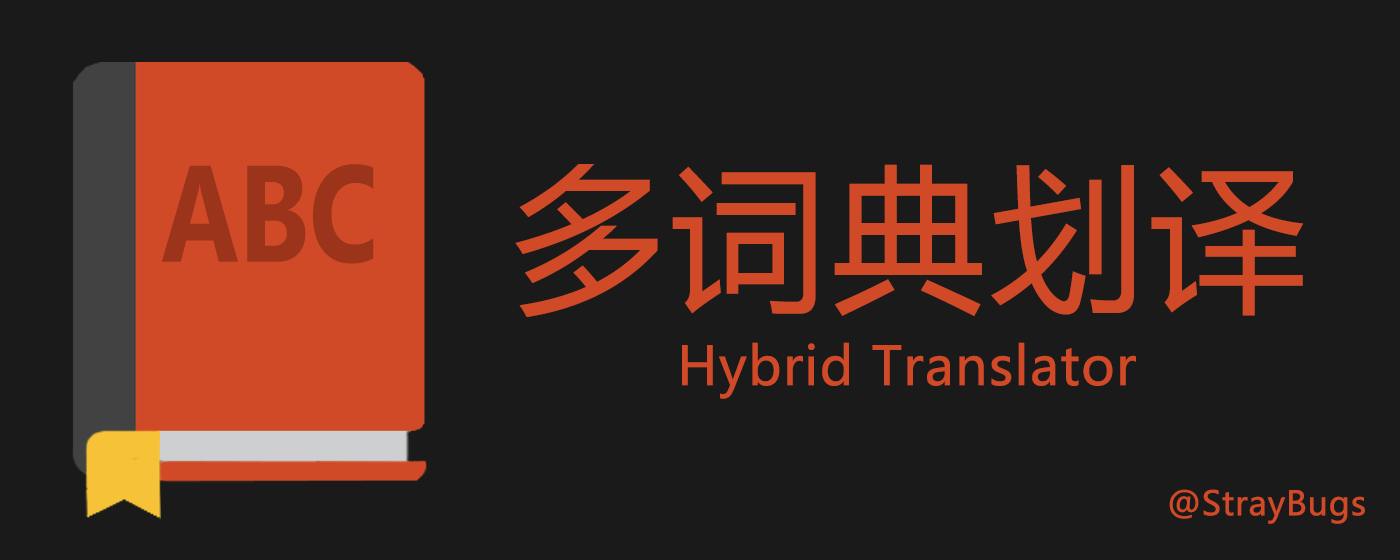
<style>
.page{position:relative;width:1400px;height:560px;background:#1a1a1a}
.page>*{position:absolute;margin:0}
.t1{font:136.9px "Leelawadee-Bold";color:#9b341a;scale:0.8 1}
.t2{font:157.3px "MicrosoftYaHei";color:#d04a28;font-weight:bold}
.t3{font:52.4px "MicrosoftYaHei";color:#d04a28;font-weight:bold}
.t4{font:32.9px "MicrosoftYaHei";color:#d04a28;font-weight:bold}
</style>
<div class="page">
<p class="t1" style="left:161px;top:164px;width:213px;height:100px">ABC</p>
<p class="t2" style="left:515px;top:164px;width:788px;height:153px">多词典划译</p>
<p class="t3" style="left:682px;top:342px;width:454px;height:57px">Hybrid Translator</p>
<p class="t4" style="left:1169px;top:489px;width:196px;height:35px">@StrayBugs</p>
</div>
